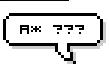
<style>
.page{position:relative;width:109px;height:69px;background:#ffffff}
.page>*{position:absolute;margin:0}
.t1{font:24px "VisitorTT2BRK";color:#000000;text-transform:uppercase}
.t2{font:25px "VisitorTT2BRK";color:#000000;text-transform:uppercase}
</style>
<div class="page">
<p class="t1" style="left:20px;top:25px;width:64px;height:9px">A  ???</p>
<p class="t2" style="left:31px;top:26px;width:10px;height:6px">*</p>
</div>
